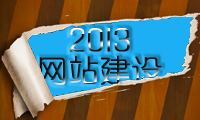
<style>
.page{position:relative;width:200px;height:120px}
.page>*{position:absolute;margin:0}
.t1{font:30px/30px "FZXQJW--GB1-0";letter-spacing:0.025em;font-weight:bold}
</style>
<div class="page">
<p class="t1" style="left:39px;top:28px;width:123px;height:57px;text-align:center">2013<br>网站建设</p>
</div>
